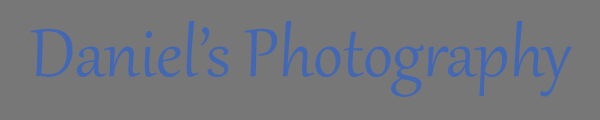
<style>
.page{position:relative;width:600px;height:120px;background:#777777}
.page>*{position:absolute;margin:0}
.t1{font:83.3px "Gabriola";color:#4267b3}
</style>
<div class="page">
<p class="t1" style="left:30px;top:20px;width:542px;height:77px">Daniel’s Photography</p>
</div>
